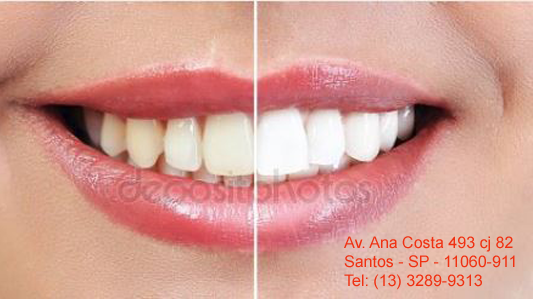
<style>
.page{position:relative;width:533px;height:299px}
.page>*{position:absolute;margin:0}
.t1{font:16px "ArialMT";color:#f03112}
</style>
<div class="page">
<p class="t1" style="left:344px;top:236px;width:171px;height:54px">Av. Ana Costa 493 cj 82<br>Santos - SP - 11060-911<br>Tel: (13) 3289-9313</p>
</div>
